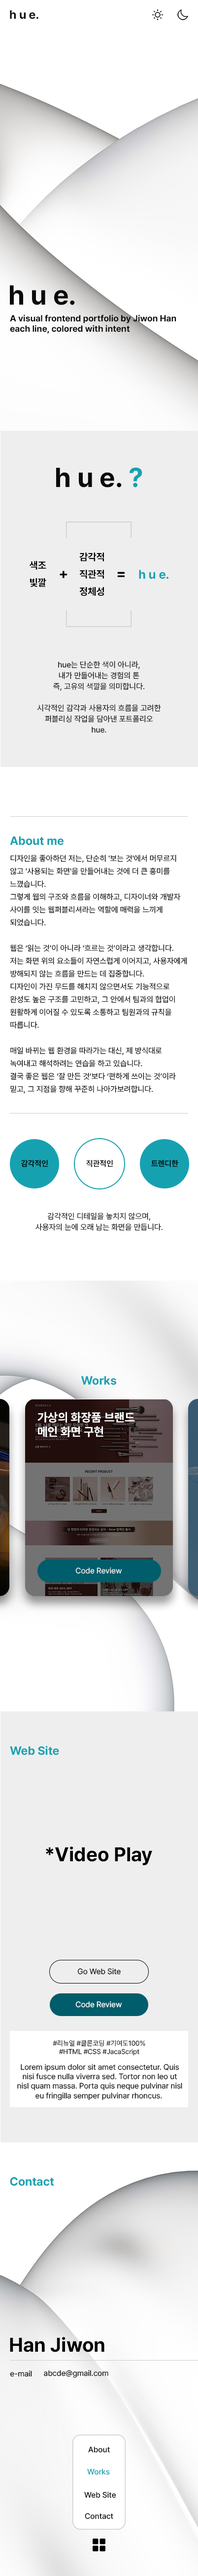
<style>
.page{position:relative;width:198px;height:2576px;background:#ffffff}
.page>*{position:absolute;margin:0}
.t1{font:11.8px "Pretendard-Bold";color:#0a0a0a}
.t2{font:27.1px "Pretendard-Bold";color:#0a0a0a}
.t3{font:8.9px "Pretendard-Bold";color:#0a0a0a}
.t4{font:27.1px "Pretendard-Bold";color:#16a1b1}
.t5{font:9.9px/17.3px "Pretendard-Bold";color:#000000}
.t6{font:12.3px "Pretendard-Bold";color:#16a1b1}
.t7{font:14.8px "Pretendard-Bold";color:#000000}
.t8{font:7.9px/10.8px "Pretendard-Regular";color:#0a0a0a}
.t9{font:11.8px "Pretendard-Bold";color:#16a1b1}
.t10{font:7.9px/12.8px "Pretendard-Regular";color:#000000}
.t11{font:7.9px "Pretendard-SemiBold";color:#000000}
.t12{font:11.8px "Pretendard-Bold";color:#ffffff}
.t13{font:7.9px "Pretendard-Regular";color:#eeeeee}
.t14{font:19.7px "Pretendard-Bold";color:#000000}
.t15{font:7.9px "Pretendard-Regular";color:#000000}
.t16{font:7.9px "Pretendard-Regular";color:#ffffff}
.t17{font:6.9px "Pretendard-Regular";color:#0a0a0a}
.t18{font:7.9px "Pretendard-Regular";color:#0a0a0a}
.t19{font:7.9px "Pretendard-Medium";color:#000000}
.t20{font:7.9px "Pretendard-Medium";color:#16a1b1}
</style>
<div class="page">
<p class="t1" style="left:10px;top:10px;width:28px;height:9px">h u e.</p>
<p class="t2" style="left:10px;top:285px;width:65px;height:20px">h u e.</p>
<p class="t3" style="left:10px;top:314px;width:166px;height:20px">A visual frontend portfolio by Jiwon Han<br>each line, colored with intent</p>
<p class="t2" style="left:56px;top:467px;width:86px;height:20px">h u e. <span class="t4">?</span></p>
<p class="t5" style="left:79px;top:553px;width:25px;height:43px">감각적<br>직관적<br>정체성</p>
<p class="t5" style="left:29px;top:561px;width:17px;height:26px">색조<br>빛깔</p>
<p class="t6" style="left:139px;top:570px;width:30px;height:9px">h u e.</p>
<p class="t7" style="left:60px;top:571px;width:7px;height:7px">+</p>
<p class="t7" style="left:117px;top:572px;width:8px;height:5px">=</p>
<p class="t8" style="left:37px;top:661px;width:124px;height:72px;text-align:center">hue는 단순한 색이 아니라,<br>내가 만들어내는 경험의 톤<br>즉, 고유의 색깔을 의미합니다.<br><br>시각적인 감각과 사용자의 흐름을 고려한<br>퍼블리싱 작업을 담아낸 포트폴리오<br>hue.</p>
<p class="t9" style="left:10px;top:836px;width:54px;height:9px">About me</p>
<p class="t10" style="left:10px;top:855px;width:177px;height:239px">디자인을 좋아하던 저는, 단순히 '보는 것'에서 머무르지<br>않고 '사용되는 화면'을 만들어내는 것에 더 큰 흥미를<br>느꼈습니다.<br>그렇게 웹의 구조와 흐름을 이해하고, 디자이너와 개발자<br>사이를 잇는 웹퍼블리셔라는 역할에 매력을 느끼게<br>되었습니다.<br> <br>웹은 ‘읽는 것’이 아니라 ‘흐르는 것’이라고 생각합니다.<br>저는 화면 위의 요소들이 자연스럽게 이어지고, 사용자에게 <br>방해되지 않는 흐름을 만드는 데 집중합니다.<br>디자인이 가진 무드를 해치지 않으면서도 기능적으로<br>완성도 높은 구조를 고민하고, 그 안에서 팀과의 협업이<br>원활하게 이어질 수 있도록 소통하고 팀원과의 규칙을<br>따릅니다.<br><br>매일 바뀌는 웹 환경을 따라가는 대신, 제 방식대로<br>녹여내고 해석하려는 연습을 하고 있습니다.<br>결국 좋은 웹은 ‘잘 만든 것’보다 ‘편하게 쓰이는 것’이라<br>믿고, 그 지점을 향해 꾸준히 나아가보려합니다.</p>
<p class="t11" style="left:21px;top:1160px;width:27px;height:7px">감각적인</p>
<p class="t11" style="left:86px;top:1160px;width:27px;height:7px">직관적인</p>
<p class="t11" style="left:151px;top:1160px;width:27px;height:7px">트렌디한</p>
<p class="t8" style="left:35px;top:1213px;width:128px;height:18px;text-align:center">감각적인 디테일을 놓치지 않으며,<br>사용자의 눈에 오래 남는 화면을 만듭니다.</p>
<p class="t9" style="left:81px;top:1376px;width:36px;height:9px">Works</p>
<p class="t12" style="left:37px;top:1412px;width:98px;height:25px">가상의 화장품 브랜드<br>메인 화면 구현</p>
<p class="t13" style="left:75px;top:1567px;width:47px;height:7px">Code Review</p>
<p class="t9" style="left:10px;top:1746px;width:49px;height:9px">Web Site</p>
<p class="t14" style="left:46px;top:1846px;width:106px;height:19px">*Video Play</p>
<p class="t15" style="left:77px;top:1968px;width:44px;height:7px">Go Web Site</p>
<p class="t16" style="left:75px;top:2001px;width:47px;height:7px">Code Review</p>
<p class="t17" style="left:53px;top:2040px;width:92px;height:15px;text-align:center">#리뉴얼 #클론코딩 #기여도100%<br>#HTML #CSS #JacaScript</p>
<p class="t18" style="left:17px;top:2064px;width:165px;height:36px;text-align:center">Lorem ipsum dolor sit amet consectetur. Quis<br>nisi fusce nulla viverra sed. Tortor non leo ut<br>nisl quam massa. Porta quis neque pulvinar nisl<br>eu fringilla semper pulvinar rhoncus.</p>
<p class="t9" style="left:10px;top:2177px;width:44px;height:9px">Contact</p>
<p class="t14" style="left:10px;top:2337px;width:94px;height:15px">Han Jiwon</p>
<p class="t15" style="left:44px;top:2370px;width:64px;height:8px">abcde@gmail.com</p>
<p class="t15" style="left:10px;top:2370px;width:22px;height:7px">e-mail</p>
<p class="t19" style="left:88px;top:2446px;width:22px;height:7px">About</p>
<p class="t20" style="left:87px;top:2469px;width:23px;height:6px">Works</p>
<p class="t19" style="left:84px;top:2492px;width:32px;height:6px">Web Site</p>
<p class="t19" style="left:85px;top:2513px;width:28px;height:6px">Contact</p>
</div>
